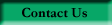
<style>
.page{position:relative;width:112px;height:25px;background:#07a767}
.page>*{position:absolute;margin:0}
.t1{font:14px "Garamond-Bold";color:#000000}
</style>
<div class="page">
<p class="t1" style="left:22px;top:7px;width:65px;height:11px">Contact Us</p>
</div>
